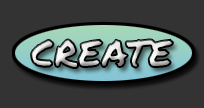
<style>
.page{position:relative;width:204px;height:108px;background:#333333}
.page>*{position:absolute;margin:0}
.t1{font:37.3px "PermanentMarker"}
</style>
<div class="page">
<p class="t1" style="left:31px;top:39px;width:142px;height:29px">CREATE</p>
</div>
